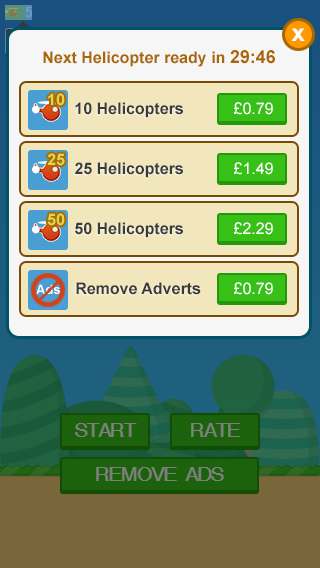
<style>
.page{position:relative;width:320px;height:568px}
.page>*{position:absolute;margin:0}
.t1{font:24px "Arial-BoldMT";color:#ffffff}
.t2{font:16px "Arial-BoldMT";color:#a96601}
.t3{font:18px "Arial-BoldMT";color:#a96601}
.t4{font:16px "Arial-BoldMT";color:#e5d251}
.t5{font:16px "Arial-BoldMT";color:#3a3a3a}
.t6{font:16px "ArialMT";color:#ffffff}
.t7{font:13px "Arial-BoldMT";color:#ffffff}
</style>
<div class="page">
<p class="t1" style="left:291px;top:28px;width:14px;height:13px">x</p>
<p class="t2" style="left:43px;top:50px;width:232px;height:17px">Next Helicopter ready in <span class="t3">29:46</span></p>
<p class="t4" style="left:48px;top:93px;width:17px;height:13px">10</p>
<p class="t5" style="left:75px;top:102px;width:108px;height:16px">10 Helicopters</p>
<p class="t6" style="left:233px;top:102px;width:40px;height:13px">£0.79</p>
<p class="t4" style="left:47px;top:153px;width:18px;height:13px">25</p>
<p class="t5" style="left:75px;top:162px;width:108px;height:16px">25 Helicopters</p>
<p class="t6" style="left:233px;top:162px;width:40px;height:13px">£1.49</p>
<p class="t4" style="left:47px;top:213px;width:18px;height:13px">50</p>
<p class="t5" style="left:75px;top:222px;width:108px;height:16px">50 Helicopters</p>
<p class="t6" style="left:233px;top:222px;width:40px;height:13px">£2.29</p>
<p class="t7" style="left:36px;top:284px;width:24px;height:10px">Ads</p>
<p class="t5" style="left:76px;top:282px;width:125px;height:13px">Remove Adverts</p>
<p class="t6" style="left:233px;top:282px;width:40px;height:13px">£0.79</p>
</div>
